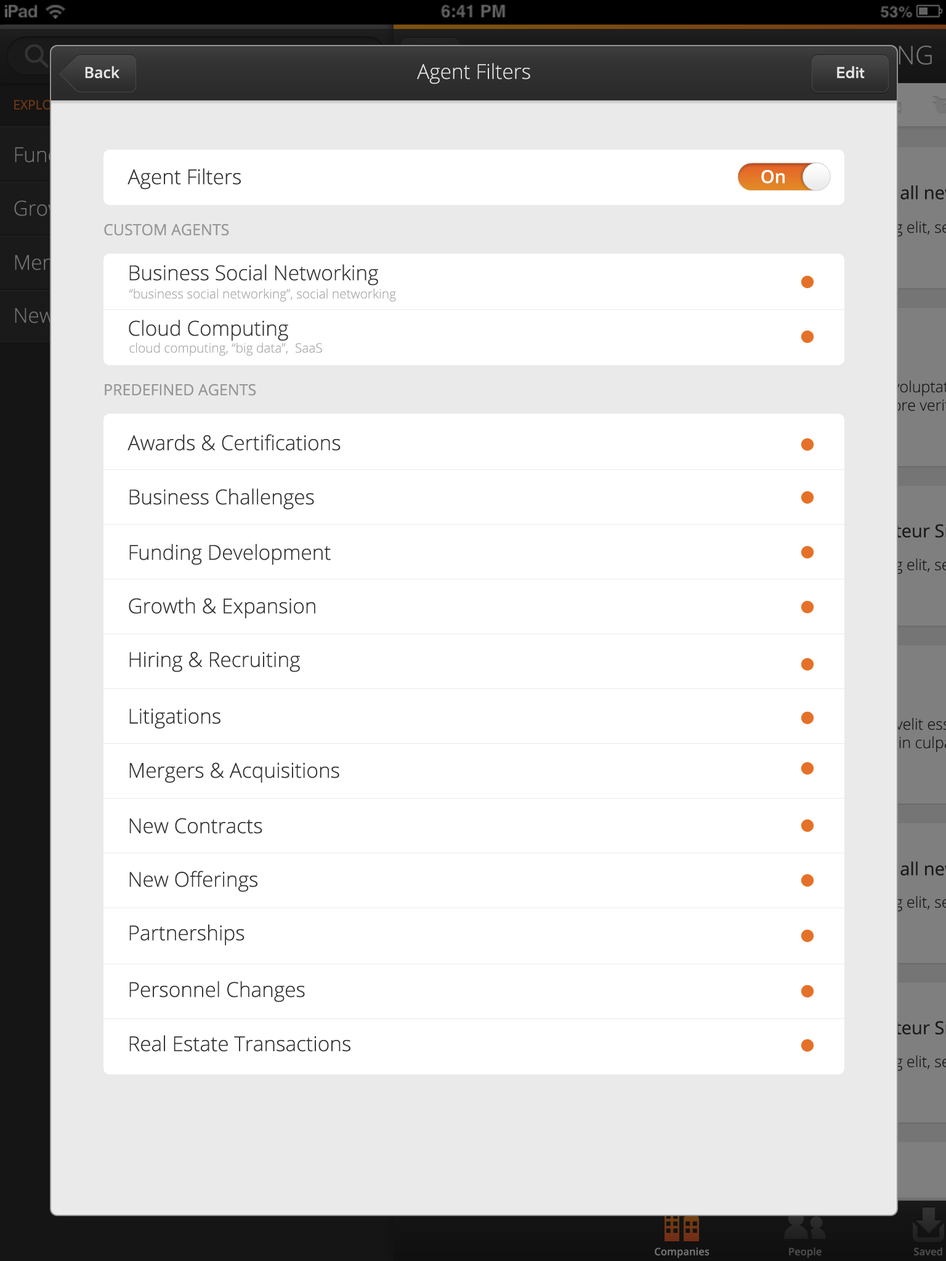
<style>
.page{position:relative;width:946px;height:1261px;background:#ffffff}
.page>*{position:absolute;margin:0}
.t1{font:15.4px "OpenSans-Semibold";color:#e5e5e5}
.t2{font:20.5px "OpenSans-Light";color:#e5e5e5}
.t3{font:15.4px "AvenirNext-DemiBold";color:#e5e5e5}
.t4{font:20.5px "OpenSans-Light";color:#343434}
.t5{font:18px "OpenSans-Semibold";color:#ffffff}
.t6{font:15.4px "OpenSans";color:#969696}
.t7{font:12.8px "OpenSans-Light";color:#aaaaaa}
</style>
<div class="page">
<p class="t1" style="left:85px;top:66px;width:35px;height:12px">Back</p>
<p class="t2" style="left:417px;top:63px;width:113px;height:21px">Agent Filters</p>
<p class="t3" style="left:837px;top:66px;width:27px;height:12px">Edit</p>
<p class="t4" style="left:127px;top:168px;width:114px;height:22px">Agent Filters</p>
<p class="t5" style="left:761px;top:170px;width:23px;height:13px">On</p>
<p class="t6" style="left:104px;top:223px;width:125px;height:13px">CUSTOM AGENTS</p>
<p class="t4" style="left:129px;top:264px;width:249px;height:22px">Business Social Networking</p>
<p class="t7" style="left:129px;top:288px;width:267px;height:14px">“business social networking”, social networking</p>
<p class="t4" style="left:129px;top:320px;width:159px;height:21px">Cloud Computing</p>
<p class="t7" style="left:129px;top:342px;width:193px;height:14px">cloud computing, “big data”,  SaaS</p>
<p class="t6" style="left:105px;top:384px;width:151px;height:12px">PREDEFINED AGENTS</p>
<p class="t4" style="left:127px;top:434px;width:213px;height:17px">Awards &amp; Certifications</p>
<p class="t4" style="left:129px;top:488px;width:185px;height:22px">Business Challenges</p>
<p class="t4" style="left:129px;top:544px;width:202px;height:21px">Funding Development</p>
<p class="t4" style="left:129px;top:597px;width:186px;height:22px">Growth &amp; Expansion</p>
<p class="t4" style="left:129px;top:651px;width:171px;height:21px">Hiring &amp; Recruiting</p>
<p class="t4" style="left:129px;top:708px;width:91px;height:21px">Litigations</p>
<p class="t4" style="left:129px;top:762px;width:210px;height:21px">Mergers &amp; Acquisitions</p>
<p class="t4" style="left:129px;top:818px;width:133px;height:16px">New Contracts</p>
<p class="t4" style="left:129px;top:871px;width:128px;height:21px">New Offerings</p>
<p class="t4" style="left:129px;top:924px;width:115px;height:22px">Partnerships</p>
<p class="t4" style="left:129px;top:981px;width:176px;height:21px">Personnel Changes</p>
<p class="t4" style="left:129px;top:1035px;width:221px;height:17px">Real Estate Transactions</p>
</div>
